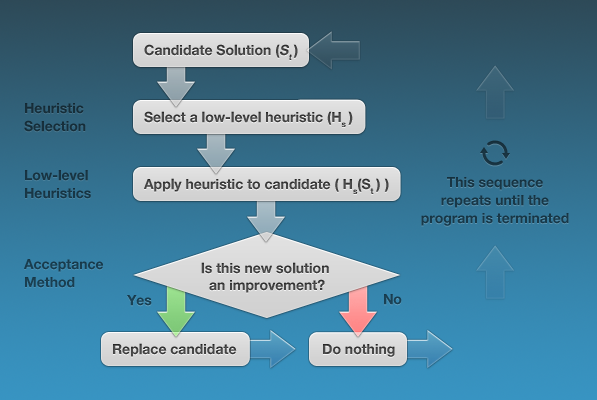
<style>
.page{position:relative;width:597px;height:400px}
.page>*{position:absolute;margin:0}
.t1{font:14px "HelveticaNeueBold";color:#444444}
.t2{font:14px "HelveticaNeueBold";color:#444444;font-style:italic}
.t3{font:24px/18px "HelveticaNeueBold";color:#172e39}
.t4{font:14px "HelveticaNeueBold";color:#454545}
.t5{font:24px/18px "HelveticaNeueBold";color:#183543}
.t6{font:24px/18px "HelveticaNeueBold";color:#183646}
.t7{font:24px/18px "HelveticaNeueBold";color:#193d4f}
.t8{font:24px "HelveticaNeueBold";color:#1a4053}
.t9{font:24px "HelveticaNeueBold";color:#193e50}
.t10{font:14px "HelveticaNeueBold";color:#434343}
.t11{font:14px "HelveticaNeueBold";color:#464646}
</style>
<div class="page">
<p class="t1" style="left:144px;top:44px;width:154px;height:16px">Candidate Solution (<span class="t2">St </span>)</p>
<p class="t3" style="left:24px;top:103px;width:62px;height:29px">Heuristic<br>Selection</p>
<p class="t4" style="left:144px;top:111px;width:209px;height:16px">Select a low-level heuristic (Hs )</p>
<p class="t5" style="left:25px;top:170px;width:66px;height:29px">Low-level<br>Heuristics</p>
<p class="t4" style="left:144px;top:178px;width:245px;height:16px">Apply heuristic to candidate ( Hs(St )  )</p>
<p class="t6" style="left:421px;top:177px;width:148px;height:49px;text-align:center">This sequence<br>repeats until the<br>program is terminated</p>
<p class="t7" style="left:24px;top:259px;width:79px;height:29px">Acceptance<br>Method</p>
<p class="t1" style="left:201px;top:262px;width:128px;height:31px;text-align:center">Is this new solution <br>an improvement?</p>
<p class="t8" style="left:384px;top:294px;width:18px;height:11px">No</p>
<p class="t9" style="left:127px;top:295px;width:25px;height:11px">Yes</p>
<p class="t10" style="left:113px;top:343px;width:124px;height:14px">Replace candidate</p>
<p class="t11" style="left:323px;top:344px;width:72px;height:13px">Do nothing</p>
</div>
